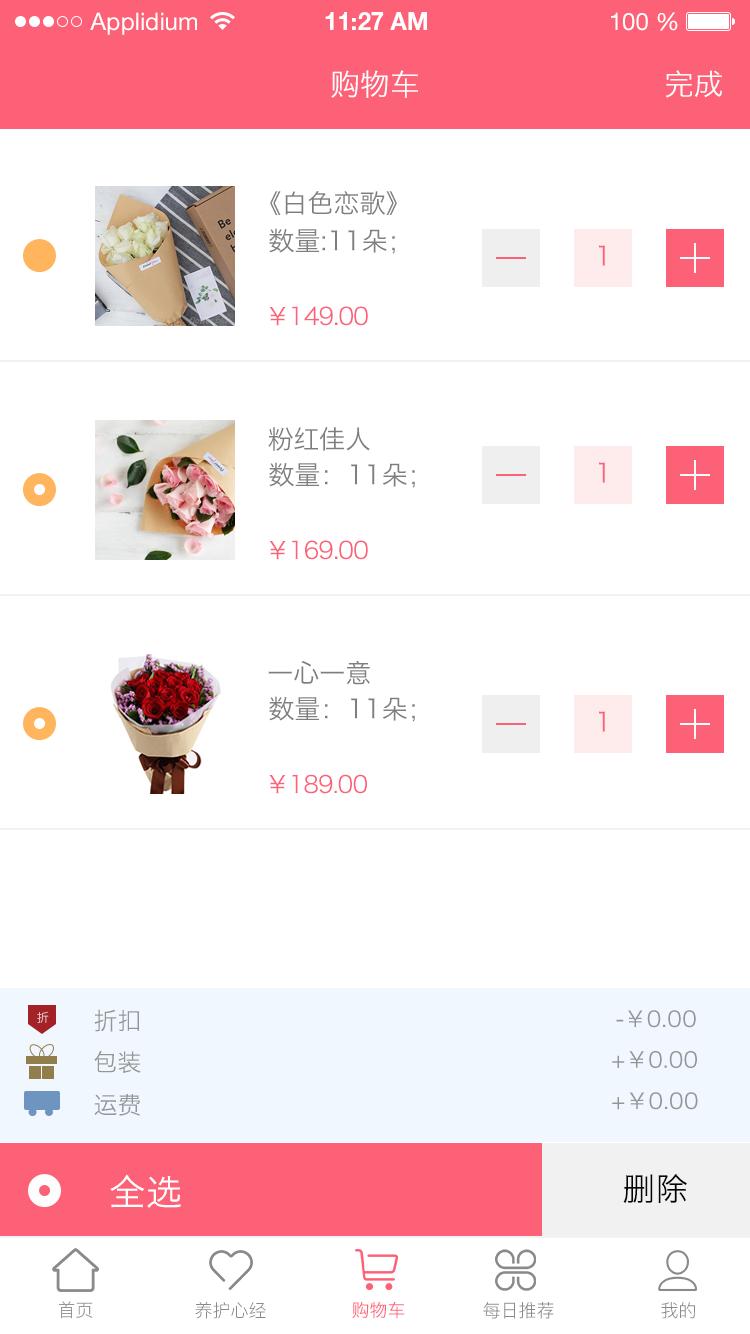
<style>
.page{position:relative;width:750px;height:1334px;background:#ffffff}
.page>*{position:absolute;margin:0}
.t1{font:24px "HelveticaNeueLTStd-Roman";color:#ffffff}
.t2{font:24px "HelveticaNeueLTStd-Bd";color:#ffffff}
.t3{font:30px "HiraginoSansGB-W3";color:#fbfbfb}
.t4{font:26px "HiraginoSansGB-W3";color:#7e7e7e}
.t5{font:26px "HiraginoSansGB-W3";letter-spacing:0.02em;color:#fc6177}
.t6{font:24px "HiraginoSansGB-W3";letter-spacing:-0.04em;color:#fc6177}
.t7{font:23.8px "HiraginoSansGB-W3";letter-spacing:-0.04em;color:#fc6177}
.t8{font:12px "HiraginoSansGB-W3";color:#edd5d7}
.t9{font:24px "HiraginoSansGB-W3";color:#949595}
.t10{font:22px "HiraginoSansGB-W3";letter-spacing:0.02em;color:#949595}
.t11{font:36px "HiraginoSansGB-W3";letter-spacing:0.02em;color:#ffffff}
.t12{font:32px "HiraginoSansGB-W3";letter-spacing:0.02em;color:#050505}
.t13{font:18px "HiraginoSansGB-W3";color:#979797}
.t14{font:18px "PingFang-SC-Regular";color:#8a8a8a}
.t15{font:18px "HiraginoSansGB-W3";color:#fc6177}
</style>
<div class="page">
<p class="t1" style="left:90px;top:12px;width:107px;height:23px">Applidium</p>
<p class="t2" style="left:325px;top:12px;width:102px;height:18px">11:27 AM</p>
<p class="t1" style="left:611px;top:12px;width:67px;height:19px">100 %</p>
<p class="t3" style="left:331px;top:70px;width:87px;height:28px">购物车</p>
<p class="t3" style="left:665px;top:70px;width:57px;height:28px">完成</p>
<p class="t4" style="left:270px;top:191px;width:127px;height:25px">《白色恋歌》</p>
<p class="t4" style="left:269px;top:228px;width:126px;height:26px">数量:11朵；</p>
<p class="t5" style="left:599px;top:245px;width:6px;height:21px">1</p>
<p class="t6" style="left:269px;top:306px;width:99px;height:20px">￥149.00</p>
<p class="t4" style="left:268px;top:427px;width:102px;height:24px">粉红佳人</p>
<p class="t4" style="left:269px;top:462px;width:146px;height:26px">数量：11朵；</p>
<p class="t5" style="left:599px;top:462px;width:6px;height:21px">1</p>
<p class="t6" style="left:269px;top:540px;width:99px;height:20px">￥169.00</p>
<p class="t4" style="left:268px;top:660px;width:102px;height:25px">一心一意</p>
<p class="t4" style="left:269px;top:696px;width:146px;height:26px">数量：11朵；</p>
<p class="t5" style="left:599px;top:711px;width:6px;height:21px">1</p>
<p class="t7" style="left:269px;top:774px;width:98px;height:20px">￥189.00</p>
<p class="t8" style="left:37px;top:1011px;width:12px;height:12px">折</p>
<p class="t9" style="left:94px;top:1009px;width:46px;height:23px">折扣</p>
<p class="t10" style="left:616px;top:1010px;width:80px;height:18px">-￥0.00</p>
<p class="t9" style="left:94px;top:1051px;width:47px;height:22px">包装</p>
<p class="t10" style="left:612px;top:1051px;width:85px;height:17px">+￥0.00</p>
<p class="t9" style="left:94px;top:1093px;width:46px;height:23px">运费</p>
<p class="t10" style="left:612px;top:1092px;width:86px;height:18px">+￥0.00</p>
<p class="t11" style="left:110px;top:1174px;width:71px;height:34px">全选</p>
<p class="t12" style="left:623px;top:1174px;width:64px;height:30px">删除</p>
<p class="t13" style="left:58px;top:1301px;width:35px;height:18px">首页</p>
<p class="t14" style="left:195px;top:1302px;width:71px;height:17px">养护心经</p>
<p class="t15" style="left:352px;top:1301px;width:53px;height:18px">购物车</p>
<p class="t14" style="left:483px;top:1302px;width:71px;height:17px">每日推荐</p>
<p class="t14" style="left:661px;top:1302px;width:34px;height:17px">我的</p>
</div>
